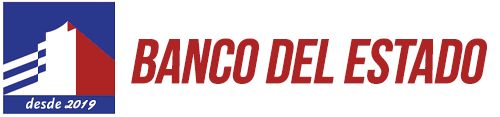
<style>
.page{position:relative;width:500px;height:117px;background:#ffffff}
.page>*{position:absolute;margin:0}
.t1{font:63px "BebasNeue";letter-spacing:-0.036em;color:#ae2424;font-weight:bold;font-style:italic}
.t2{font:14px "Alako-Bold";letter-spacing:0.024em;color:#ffffff;font-weight:bold;font-style:italic}
</style>
<div class="page">
<p class="t1" style="left:131px;top:38px;width:356px;height:46px">BANCO del estado</p>
<p class="t2" style="left:64px;top:100px;width:32px;height:10px">2019</p>
</div>
